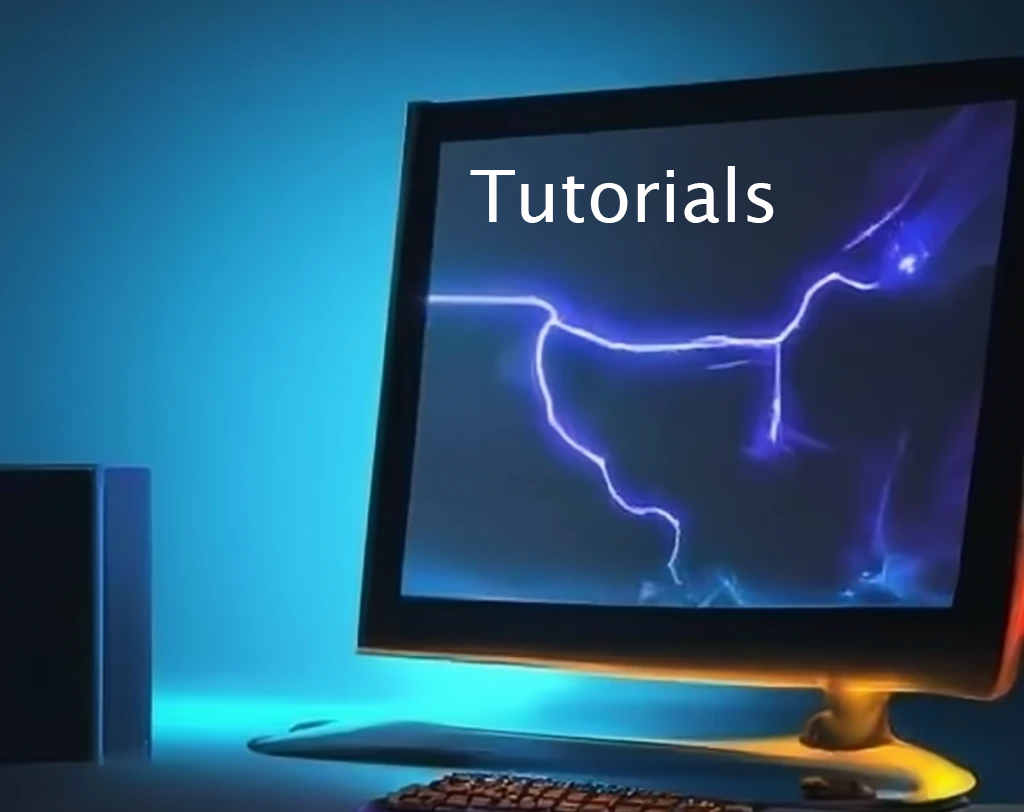
<style>
.page{position:relative;width:1024px;height:812px}
.page>*{position:absolute;margin:0}
.t1{font:72px "LucidaSans";color:#ffffff}
</style>
<div class="page">
<p class="t1" style="left:470px;top:166px;width:304px;height:57px">Tutorials</p>
</div>
